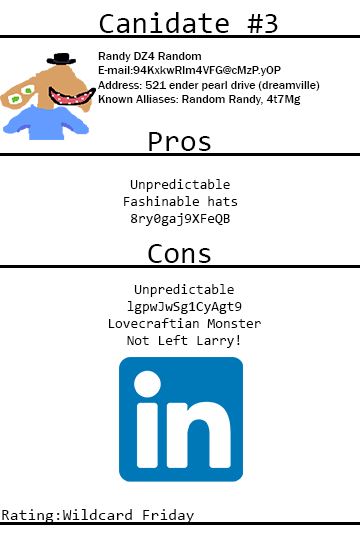
<style>
.page{position:relative;width:360px;height:540px;background:#ffffff}
.page>*{position:absolute;margin:0}
.t1{font:30px "Consolas";color:#000000}
.t2{font:12px "FranklinGothic-Medium";color:#000000}
.t3{font:14px "Consolas";color:#000000}
.t4{font:16px "Consolas";color:#000000}
</style>
<div class="page">
<p class="t1" style="left:99px;top:12px;width:179px;height:21px">Canidate #3</p>
<p class="t2" style="left:98px;top:52px;width:222px;height:53px">Randy DZ4 Random<br>E-mail:94KxkwRlm4VFG@cMzP.yOP<br>Address: 521 ender pearl drive (dreamville)<br>Known Alliases: Random Randy, 4t7Mg</p>
<p class="t1" style="left:149px;top:132px;width:62px;height:19px">Pros</p>
<p class="t3" style="left:124px;top:179px;width:114px;height:47px;text-align:center">Unpredictable<br>Fashinable hats<br>8ry0gaj9XFeQB</p>
<p class="t1" style="left:148px;top:244px;width:63px;height:19px">Cons</p>
<p class="t3" style="left:109px;top:284px;width:152px;height:64px;text-align:center">Unpredictable<br>lgpwJwSg1CyAgt9<br>Lovecraftian Monster<br>Not Left Larry!</p>
<p class="t4" style="left:2px;top:509px;width:192px;height:14px">Rating:Wildcard Friday</p>
</div>
